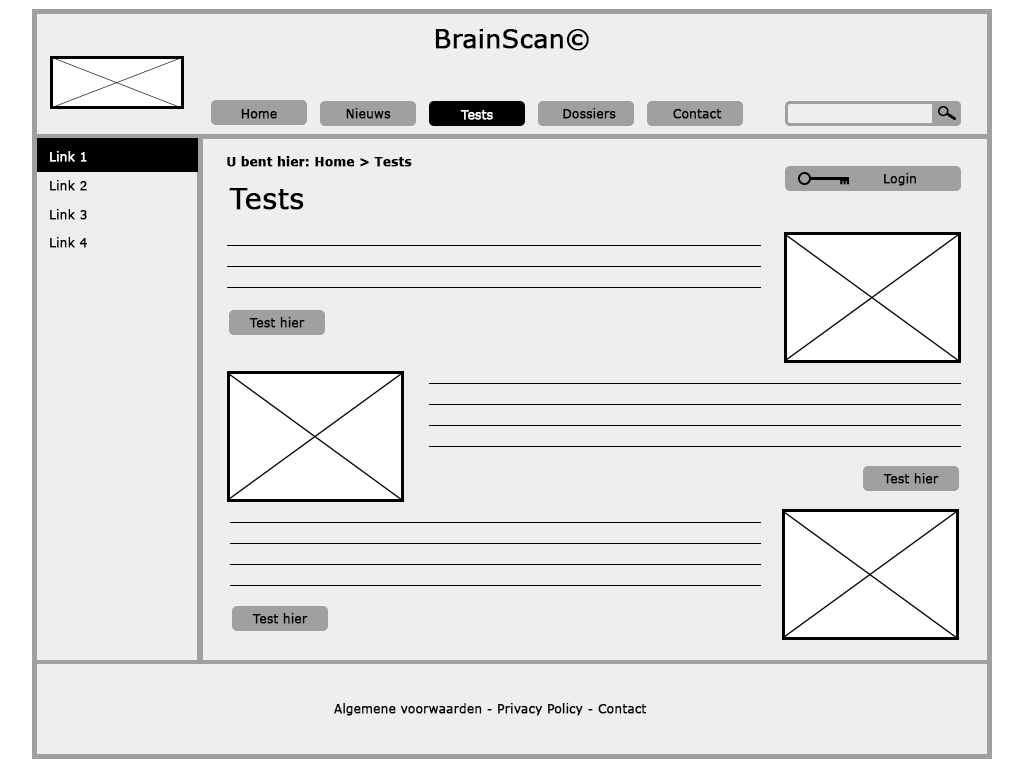
<style>
.page{position:relative;width:1024px;height:768px;background:#eeeeee}
.page>*{position:absolute;margin:0}
.t1{font:24.9px "Verdana";color:#000000;font-weight:bold}
.t2{font:12px "Verdana";color:#000000;font-weight:bold}
.t3{font:12px "Verdana";color:#ffffff;font-weight:bold}
.t4{font:12px "Verdana-Bold";color:#000000;font-weight:bold}
.t5{font:28px "Verdana";color:#000000;font-weight:bold}
</style>
<div class="page">
<p class="t1" style="left:435px;top:29px;width:154px;height:22px">BrainScan©</p>
<p class="t2" style="left:241px;top:109px;width:36px;height:10px">Home</p>
<p class="t2" style="left:346px;top:108px;width:45px;height:11px">Nieuws</p>
<p class="t3" style="left:460px;top:110px;width:33px;height:10px">Tests</p>
<p class="t2" style="left:563px;top:108px;width:53px;height:11px">Dossiers</p>
<p class="t2" style="left:673px;top:109px;width:49px;height:10px">Contact</p>
<p class="t4" style="left:227px;top:156px;width:185px;height:11px">U bent hier: Home &gt; Tests</p>
<p class="t2" style="left:884px;top:173px;width:32px;height:13px">Login</p>
<p class="t5" style="left:229px;top:188px;width:75px;height:22px">Tests</p>
<p class="t2" style="left:249px;top:317px;width:56px;height:11px">Test hier</p>
<p class="t2" style="left:883px;top:473px;width:56px;height:11px">Test hier</p>
<p class="t2" style="left:252px;top:613px;width:56px;height:11px">Test hier</p>
<p class="t2" style="left:334px;top:703px;width:313px;height:13px">Algemene voorwaarden - Privacy Policy - Contact</p>
</div>
